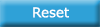
<style>
.page{position:relative;width:100px;height:27px;background:#2fa1d7}
.page>*{position:absolute;margin:0}
.t1{font:13.5px "Verdana";color:#ffffff}
</style>
<div class="page">
<p class="t1" style="left:33px;top:7px;width:36px;height:11px">Reset</p>
</div>
